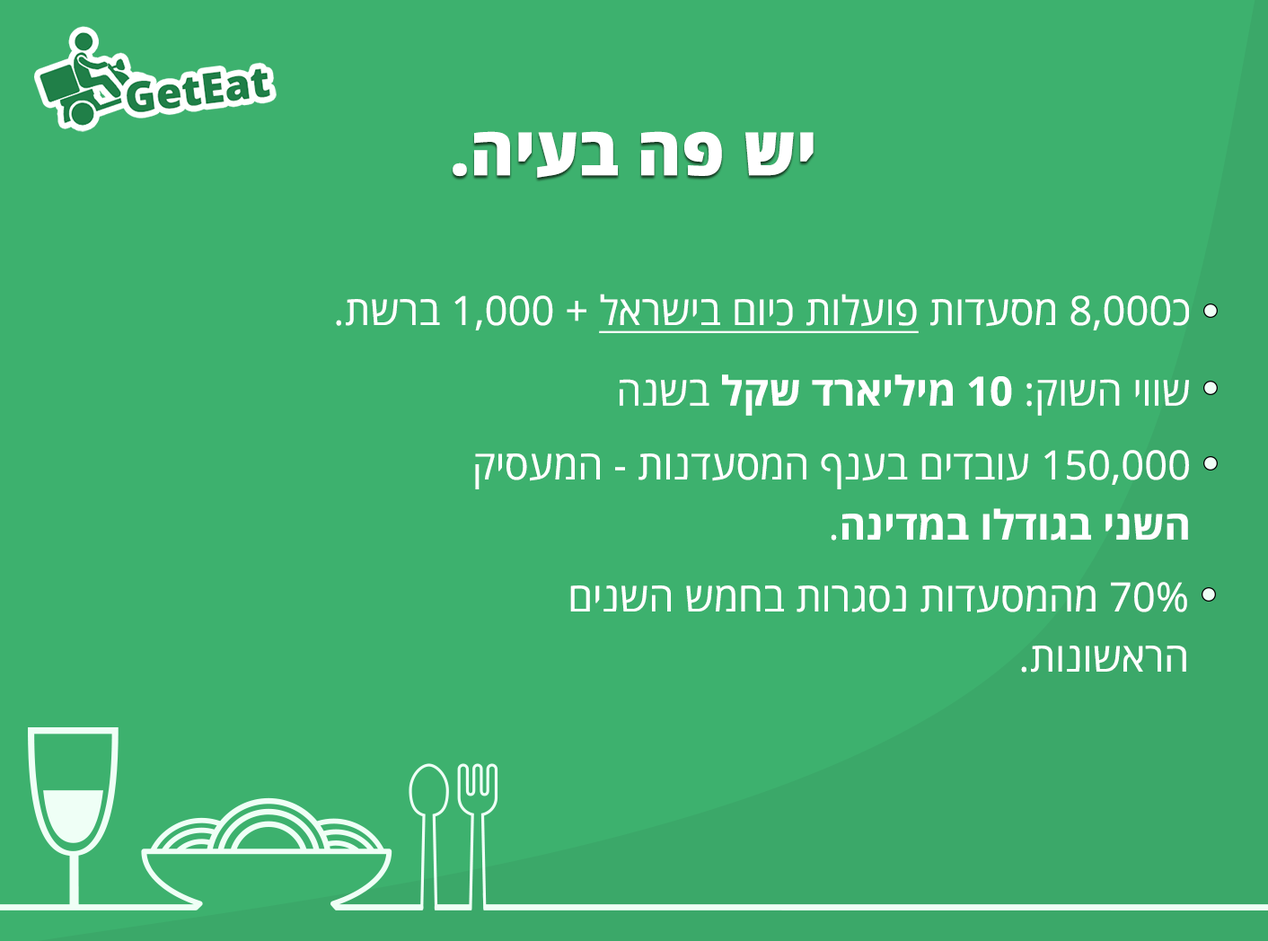
<style>
.page{position:relative;width:1268px;height:941px;background:#3db16e}
.page>*{position:absolute;margin:0}
.t1{font:67.3px "OpenSansHebrew-ExtraBold";letter-spacing:0.005em;color:#ffffff}
.t2{font:40.4px "OpenSansHebrew-Regular";letter-spacing:0.005em;color:#ffffff;text-decoration:underline}
.t3{font:40.4px "OpenSansHebrew-Regular";letter-spacing:0.005em;color:#ffffff}
.t4{font:40.4px "OpenSansHebrew-Bold";letter-spacing:0.005em;color:#ffffff}
.t5{font:40.4px/20px "OpenSansHebrew-Regular";letter-spacing:0.005em;color:#ffffff}
.t6{font:40.4px/20px "OpenSansHebrew-Bold";letter-spacing:0.005em;color:#ffffff}
</style>
<div class="page">
<p class="t1" style="left:452px;top:131px;width:361px;height:47px">יש פה בעיה.</p>
<p class="t2" style="left:336px;top:294px;width:853px;height:39px"><span class="t3">.תשרב 1,000 + </span>לארשיב םויכ תולעופ<span class="t3"> תודעסמ 8,000כ</span></p>
<p class="t4" style="left:619px;top:374px;width:570px;height:42px"><span class="t3">שווי השוק: </span>10 מיליארד שקל <span class="t3">בשנה</span></p>
<p class="t5" style="left:475px;top:450px;width:714px;height:90px;text-align:right">קיסעמה - תונדעסמה ףנעב םידבוע 150,000<br><br><br> .<span class="t6">הנידמב ולדוגב ינשה</span></p>
<p class="t5" style="left:570px;top:582px;width:617px;height:90px;text-align:right">םינשה שמחב תורגסנ תודעסמהמ 70%<br><br><br>.תונושארה</p>
</div>
